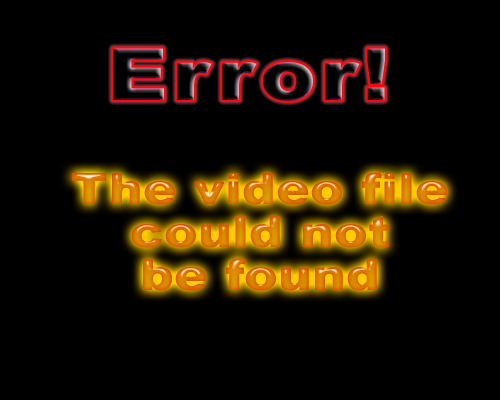
<style>
.page{position:relative;width:500px;height:400px;background:#000000}
.page>*{position:absolute;margin:0}
.t1{font:43.2px "Arial-Black";scale:1.17 1}
</style>
<div class="page">
<p class="t1" style="left:72px;top:172px;width:376px;height:119px;text-align:center">The video file<br>could not<br>be found</p>
</div>
